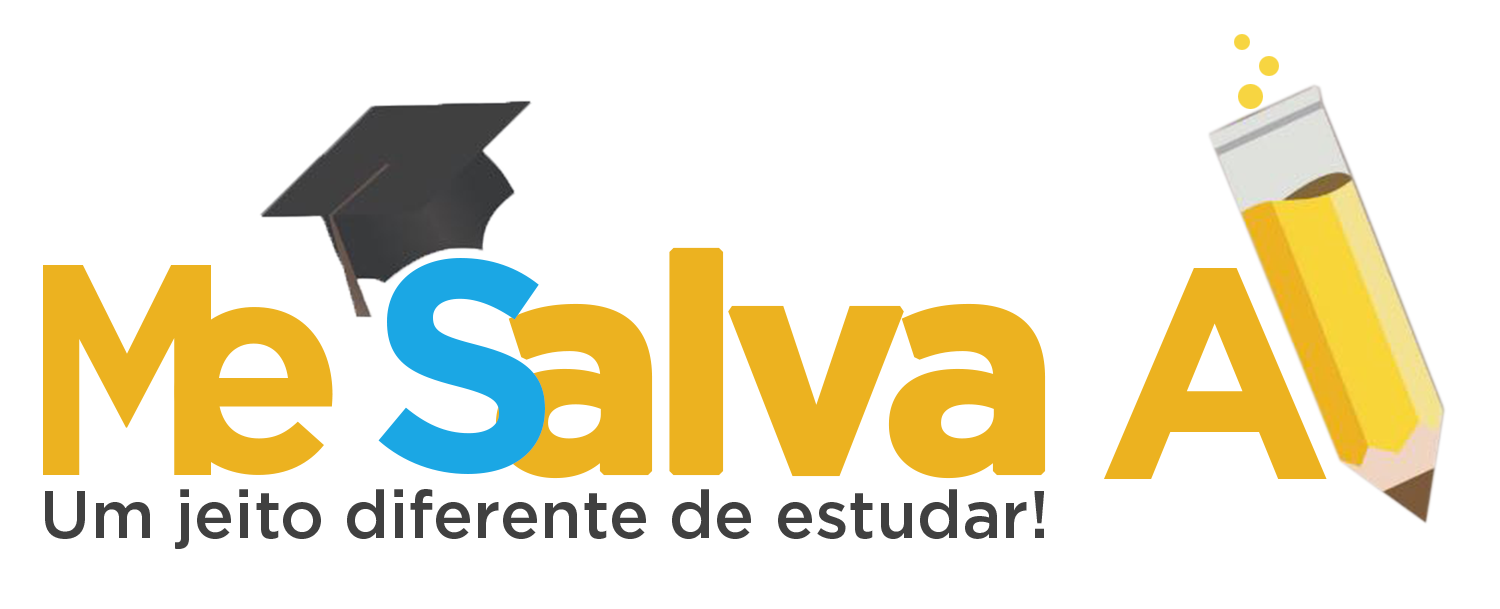
<style>
.page{position:relative;width:1500px;height:609px;background:#ffffff}
.page>*{position:absolute;margin:0}
.t1{font:300px "Gotham-Bold";letter-spacing:-0.08em;color:#ecb220;font-weight:bold}
.t2{font:300px "Gotham-Bold";color:#ecb220;scale:0.8 1}
.t3{font:300px "Gotham-Bold";color:#1ba7e4}
.t4{font:300px "Gotham-Bold";color:#ecb220}
.t5{font:67.1px "Gotham-Medium";color:#404040}
</style>
<div class="page">
<p class="t1" style="left:495px;top:247px;width:551px;height:232px">alva</p>
<p class="t2" style="left:43px;top:265px;width:168px;height:210px">M</p>
<p class="t3" style="left:378px;top:258px;width:167px;height:216px">S</p>
<p class="t4" style="left:1104px;top:268px;width:223px;height:211px">A</p>
<p class="t4" style="left:174px;top:307px;width:159px;height:168px">e</p>
<p class="t5" style="left:45px;top:489px;width:999px;height:60px">Um jeito diferente de estudar!</p>
</div>
